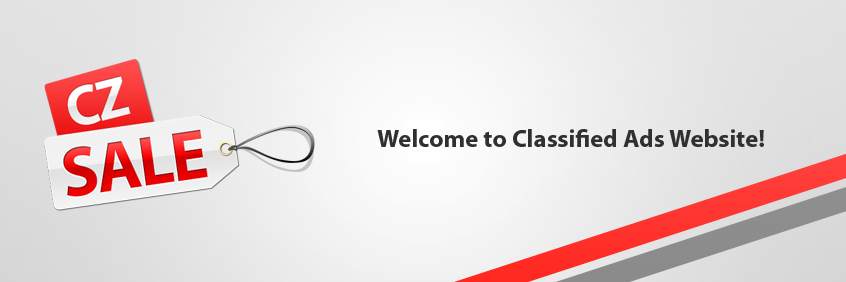
<style>
.page{position:relative;width:846px;height:282px}
.page>*{position:absolute;margin:0}
.t1{font:25px "MyriadPro-Bold";color:#303030}
</style>
<div class="page">
<p class="t1" style="left:377px;top:129px;width:387px;height:18px">Welcome to Classified Ads Website!</p>
</div>
